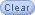
<style>
.page{position:relative;width:35px;height:15px}
.page>*{position:absolute;margin:0}
.t1{font:10px "ArialMT";color:#4d6185}
</style>
<div class="page">
<p class="t1" style="left:5px;top:4px;width:24px;height:7px">Clear</p>
</div>
